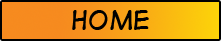
<style>
.page{position:relative;width:221px;height:41px}
.page>*{position:absolute;margin:0}
.t1{font:25px "DigitalStrip";color:#000000}
</style>
<div class="page">
<p class="t1" style="left:72px;top:10px;width:77px;height:20px">Home</p>
</div>
